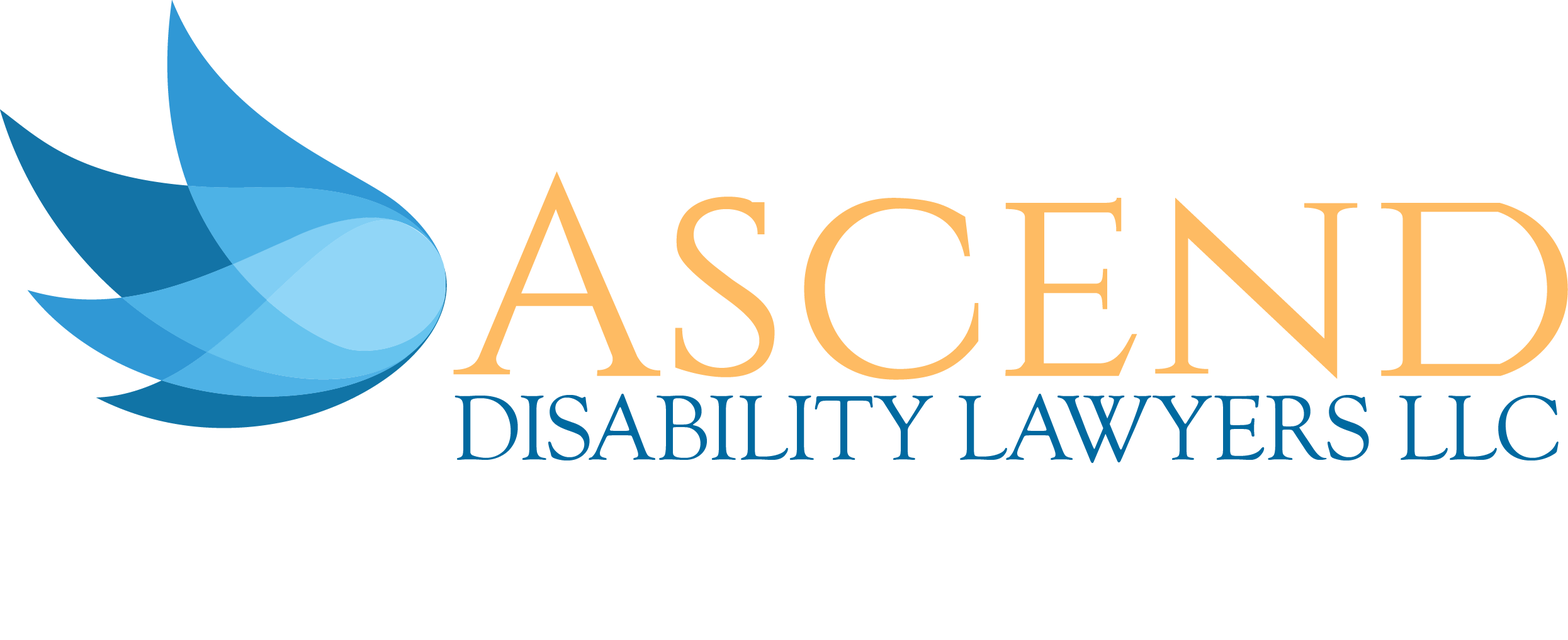
<style>
.page{position:relative;width:1568px;height:640px;background:#ffffff}
.page>*{position:absolute;margin:0}
.t1{font:94.4px "GoudyOldStyleT-Regular";color:#0069a0}
</style>
<div class="page">
<p class="t1" style="left:454px;top:393px;width:1105px;height:70px">DISABILITY LAWYERS LLC</p>
</div>
